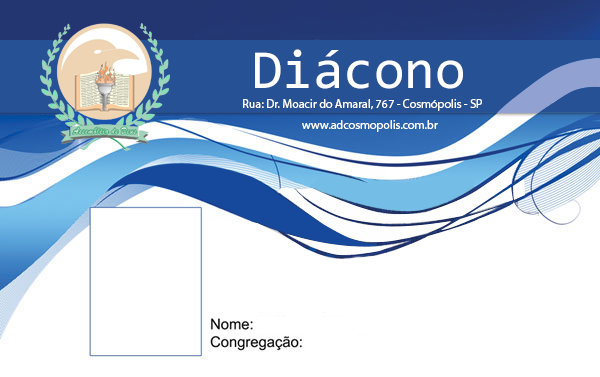
<style>
.page{position:relative;width:600px;height:377px;background:#ffffff}
.page>*{position:absolute;margin:0}
.t1{font:55.3px "Consolas";color:#ffffff}
.t2{font:12px "MyriadPro-Regular";color:#ffffff}
</style>
<div class="page">
<p class="t1" style="left:255px;top:49px;width:208px;height:40px">Diácono</p>
<p class="t2" style="left:243px;top:99px;width:239px;height:12px">Rua: Dr. Moacir do Amaral, 767 - Cosmópolis - SP</p>
<p class="t2" style="left:302px;top:120px;width:136px;height:12px">www.adcosmopolis.com.br</p>
</div>
